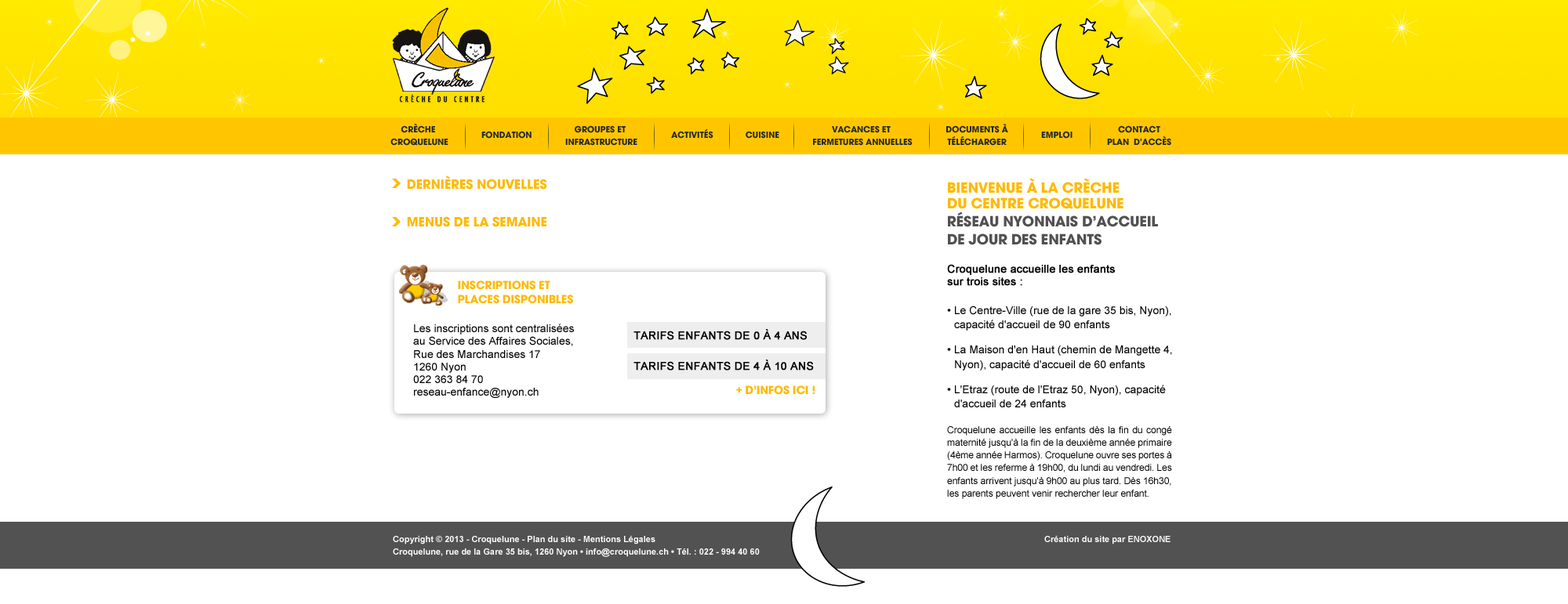
<style>
.page{position:relative;width:1568px;height:604px;background:#ffffff}
.page>*{position:absolute;margin:0}
.t1{font:9.4px/12.7px "AvantGard-Bold";color:#2a2a2a;text-transform:uppercase}
.t2{font:9.4px "AvantGard-Bold";color:#2a2a2a;text-transform:uppercase}
.t3{font:14.1px "AvantGard-Bold";color:#ffb900;text-transform:uppercase}
.t4{font:9.4px/12.7px "ArialMT";color:#000000}
.t5{font:15.7px/15.7px "AvantGard-Bold";color:#ffb900;text-transform:uppercase}
.t6{font:15.7px/18.1px "AvantGard-Bold";color:#515151;text-transform:uppercase}
.t7{font:11px/12.7px "ArialMT";color:#000000;font-weight:bold}
.t8{font:11px/14.3px "ArialMT";color:#000000}
.t9{font:11px/12.7px "ArialMT";color:#000000}
.t10{font:12.3px/13.7px "AvantGard-Bold";color:#ffb900;text-transform:uppercase}
.t11{font:11px/15.1px "ArialMT";color:#000000;text-transform:uppercase;font-weight:bold}
.t12{font:12.3px "AvantGard-Bold";color:#ffb900;text-transform:uppercase}
.t13{font:8.6px/12.7px "Arial-BoldMT";color:#ffffff}
</style>
<div class="page">
<p class="t1" style="left:390px;top:123px;width:58px;height:23px;text-align:center">Crèche <br>Croquelune</p>
<p class="t1" style="left:565px;top:125px;width:72px;height:21px;text-align:center">Groupes et <br>infrastructure</p>
<p class="t1" style="left:813px;top:125px;width:100px;height:21px;text-align:center">Vacances et <br>fermetures annuelles</p>
<p class="t1" style="left:946px;top:124px;width:62px;height:22px;text-align:center">DOCUMENTs à<br>télécharger</p>
<p class="t1" style="left:1107px;top:125px;width:64px;height:21px;text-align:center">Contact<br>Plan  d'accès</p>
<p class="t2" style="left:481px;top:131px;width:51px;height:8px">Fondation</p>
<p class="t2" style="left:671px;top:129px;width:42px;height:10px">ACTIVITés</p>
<p class="t2" style="left:746px;top:131px;width:33px;height:8px">Cuisine</p>
<p class="t2" style="left:1041px;top:131px;width:32px;height:8px">Emploi</p>
<p class="t3" style="left:407px;top:176px;width:140px;height:14px">dernières nouvelles</p>
<p class="t4" style="left:947px;top:178px;width:225px;height:321px;text-align:justify"><span class="t5">Bienvenue à la Crèche <br>du Centre Croquelune<br></span><span class="t6">Réseau nyonnais d’accueil <br>de jour des enfants<br><br></span><span class="t7">Croquelune accueille les enfants<br>sur trois sites :<br></span><span class="t8"><br>• Le Centre-Ville (rue de la gare 35 bis, Nyon),<br>  capacité d'accueil de 90 enfants<br></span><span class="t9"><br>• La Maison d'en Haut (chemin de Mangette 4,<br>  Nyon), capacité d'accueil de 60 enfants<br><br>• L'Etraz (route de l'Etraz 50, Nyon), capacité<br>  d'accueil de 24 enfants<br><br></span>Croquelune accueille les enfants dès la fin du congé maternité jusqu'à la fin de la deuxième année primaire (4ème année Harmos). Croquelune ouvre ses portes à 7h00 et les referme à 19h00, du lundi au vendredi. Les enfants arrivent jusqu'à 9h00 au plus tard. Dès 16h30, les parents peuvent venir rechercher leur enfant.</p>
<p class="t3" style="left:407px;top:216px;width:139px;height:11px">Menus de la semaine</p>
<p class="t10" style="left:458px;top:281px;width:115px;height:23px;text-align:justify">Inscriptions et <br>places disponibles</p>
<p class="t9" style="left:413px;top:324px;width:161px;height:74px">Les inscriptions sont centralisées <br>au Service des Affaires Sociales,<br>Rue des Marchandises 17<br>1260 Nyon<br>022 363 84 70<br>reseau-enfance@nyon.ch</p>
<p class="t11" style="left:633px;top:329px;width:181px;height:42px">TARIFS Enfants de 0 à 4 ans<br><br>TARIFS Enfants de 4 à 10 ans</p>
<p class="t12" style="left:736px;top:386px;width:79px;height:9px">+ d’infos ici !</p>
<p class="t13" style="left:393px;top:536px;width:778px;height:21px">Copyright © 2013 - Croquelune - Plan du site - Mentions Légales                                                             Création du site par ENOXONE<br>Croquelune, rue de la Gare 35 bis, 1260 Nyon • info@croquelune.ch • Tél. : 022 - 994 40 60</p>
</div>
